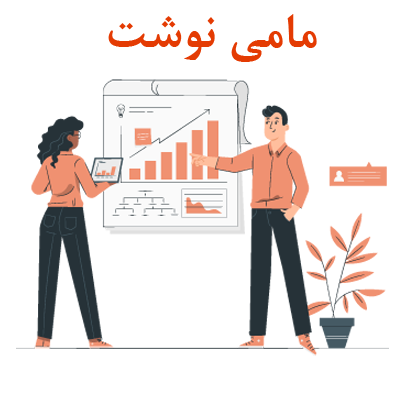
<style>
.page{position:relative;width:400px;height:400px;background:#ffffff}
.page>*{position:absolute;margin:0}
.t1{font:54px "BNazaninBold";color:#e43b03}
.t2{font:54px "BNazaninBold";color:#000000}
</style>
<div class="page">
<p class="t1" style="left:108px;top:14px;width:209px;height:48px"><span class="t2">                </span>مامی نوشت</p>
</div>
